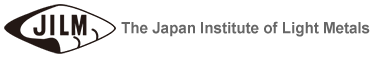
<style>
.page{position:relative;width:380px;height:58px;background:#ffffff}
.page>*{position:absolute;margin:0}
.t1{font:15.4px "Arial-BoldMT";color:#666666}
</style>
<div class="page">
<p class="t1" style="left:121px;top:21px;width:249px;height:16px">The Japan Institute of Light Metals</p>
</div>
